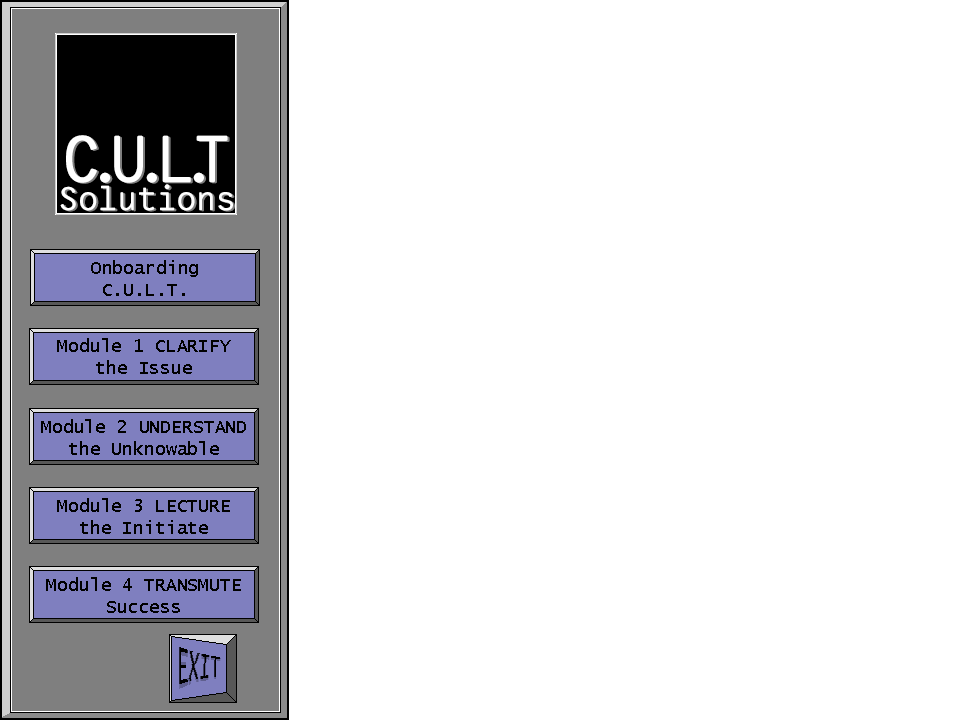
<style>
.page{position:relative;width:960px;height:720px;background:#ffffff}
.page>*{position:absolute;margin:0}
.t1{font:36px/27.9px "ISOv0.5-Regular";color:#ffffff}
.t2{font:72px/47.8px "ISOv0.5-Regular";letter-spacing:-0.22em;color:#ffffff}
.t3{font:72px/47.8px "ISOv0.5-Regular";letter-spacing:-0.36em;color:#ffffff}
.t4{font:36px/27.9px "ISOv0.5-Regular"}
.t5{font:72px/47.8px "ISOv0.5-Regular";letter-spacing:-0.22em}
.t6{font:72px/47.8px "ISOv0.5-Regular";letter-spacing:-0.36em}
.t7{font:18px/22px "LucidaConsole";color:#010101}
</style>
<div class="page">
<p class="t1" style="left:60px;top:135px;width:173px;height:76px;text-align:center"><span class="t2">C.U.L</span><span class="t3">.</span><span class="t2">T<br></span>Solutions</p>
<p class="t4" style="left:62px;top:136px;width:173px;height:76px;text-align:center"><span class="t5">C.U.L</span><span class="t6">.</span><span class="t5">T<br></span>Solutions</p>
<p class="t7" style="left:91px;top:260px;width:107px;height:36px;text-align:center">Onboarding<br>C.U.L.T.</p>
<p class="t7" style="left:57px;top:338px;width:174px;height:36px;text-align:center">Module 1 CLARIFY<br>the Issue</p>
<p class="t7" style="left:41px;top:419px;width:205px;height:36px;text-align:center">Module 2 UNDERSTAND<br>the Unknowable</p>
<p class="t7" style="left:57px;top:498px;width:173px;height:36px;text-align:center">Module 3 LECTURE<br>the Initiate</p>
<p class="t7" style="left:46px;top:577px;width:195px;height:36px;text-align:center">Module 4 TRANSMUTE<br>Success</p>
</div>
